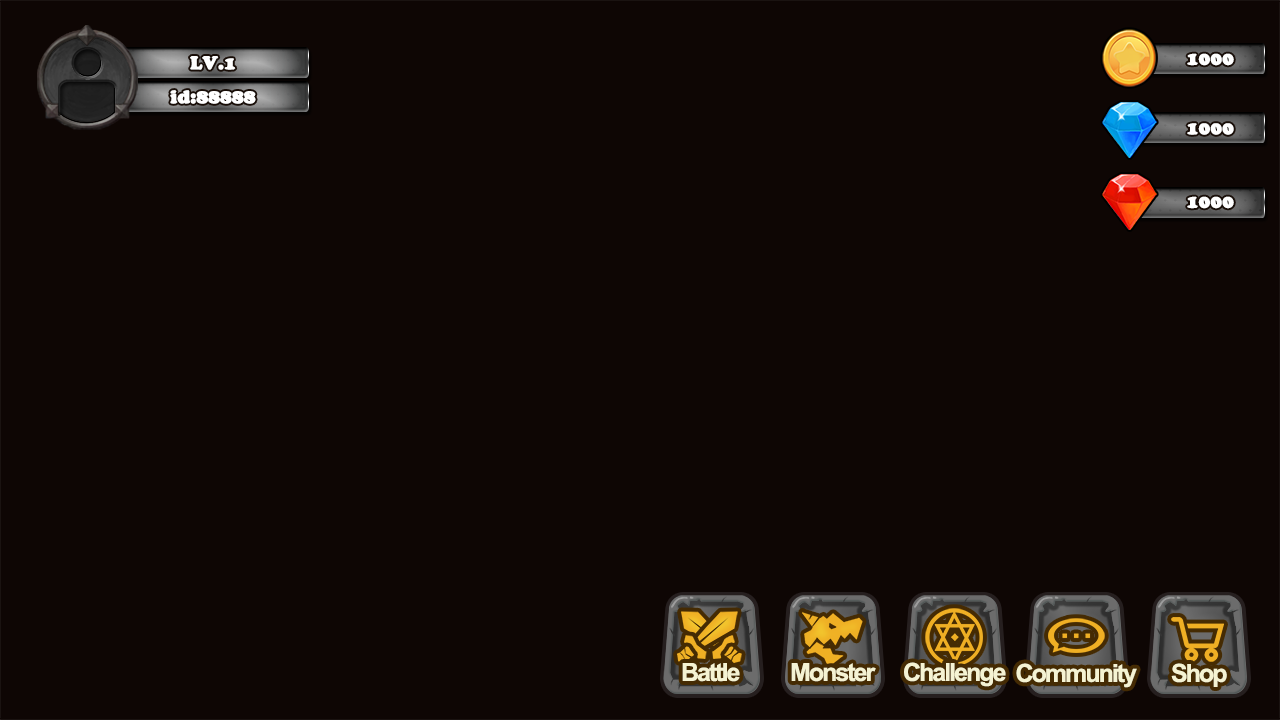
<style>
.page{position:relative;width:1280px;height:720px;background:#0e0604}
.page>*{position:absolute;margin:0}
.t1{font:18px "CooperBlackStd";color:#ffffff;font-weight:bold}
.t2{font:25px "Arial-BoldMT";letter-spacing:-0.08em;color:#f5f3d3}
</style>
<div class="page">
<p class="t1" style="left:1187px;top:53px;width:47px;height:13px">1000</p>
<p class="t1" style="left:190px;top:56px;width:46px;height:14px">LV.1</p>
<p class="t1" style="left:170px;top:90px;width:86px;height:14px">id:88888</p>
<p class="t1" style="left:1187px;top:123px;width:47px;height:12px">1000</p>
<p class="t1" style="left:1187px;top:196px;width:47px;height:13px">1000</p>
<p class="t2" style="left:682px;top:663px;width:58px;height:19px">Battle</p>
<p class="t2" style="left:791px;top:663px;width:85px;height:19px">Monster</p>
<p class="t2" style="left:904px;top:662px;width:102px;height:25px">Challenge</p>
<p class="t2" style="left:1016px;top:663px;width:121px;height:25px">Community</p>
<p class="t2" style="left:1171px;top:663px;width:56px;height:24px">Shop</p>
</div>
